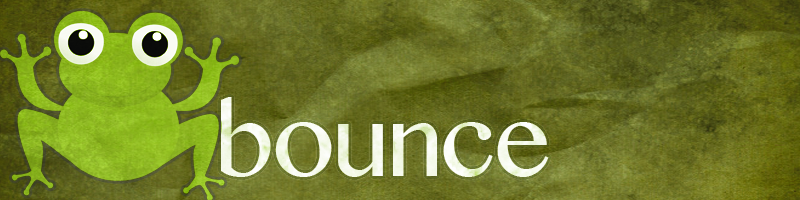
<style>
.page{position:relative;width:800px;height:200px}
.page>*{position:absolute;margin:0}
.t1{font:100px "TamilMN";letter-spacing:-0.025em;color:#fcfdfd}
</style>
<div class="page">
<p class="t1" style="left:221px;top:97px;width:328px;height:80px">bounce</p>
</div>
